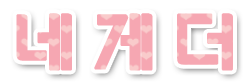
<style>
.page{position:relative;width:250px;height:84px;background:#ffffff}
.page>*{position:absolute;margin:0}
.t1{font:70.3px "±èÁ¦½ÃÃ¼M";letter-spacing:0.12em;color:#f7bdbd;font-weight:bold}
</style>
<div class="page">
<p class="t1" style="left:16px;top:13px;width:217px;height:58px">네게더</p>
</div>
